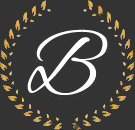
<style>
.page{position:relative;width:135px;height:130px;background:#333333}
.page>*{position:absolute;margin:0}
.t1{font:91px "AlexBrush-Regular";color:#ffffff}
</style>
<div class="page">
<p class="t1" style="left:27px;top:29px;width:81px;height:66px">B</p>
</div>
